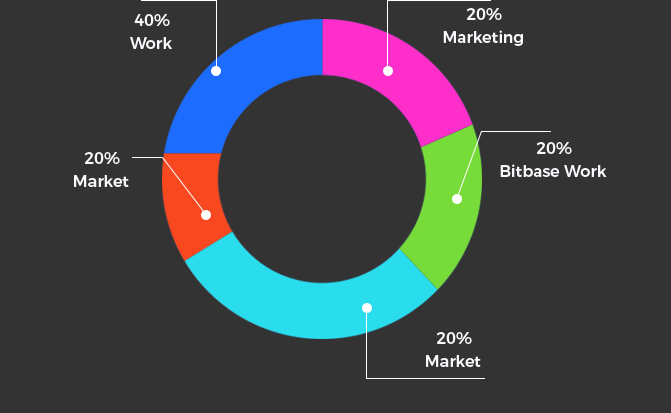
<style>
.page{position:relative;width:671px;height:413px;background:#333333}
.page>*{position:absolute;margin:0}
.t1{font:16px "Montserrat-Medium";color:#f7f9fc}
</style>
<div class="page">
<p class="t1" style="left:134px;top:14px;width:36px;height:12px">40%</p>
<p class="t1" style="left:466px;top:8px;width:36px;height:12px">20%</p>
<p class="t1" style="left:443px;top:30px;width:80px;height:16px">Marketing</p>
<p class="t1" style="left:130px;top:37px;width:42px;height:12px">Work</p>
<p class="t1" style="left:536px;top:142px;width:36px;height:12px">20%</p>
<p class="t1" style="left:84px;top:152px;width:36px;height:12px">20%</p>
<p class="t1" style="left:500px;top:164px;width:107px;height:13px">Bitbase Work</p>
<p class="t1" style="left:74px;top:175px;width:55px;height:12px">Market</p>
<p class="t1" style="left:436px;top:332px;width:36px;height:12px">20%</p>
<p class="t1" style="left:426px;top:355px;width:55px;height:12px">Market</p>
</div>
